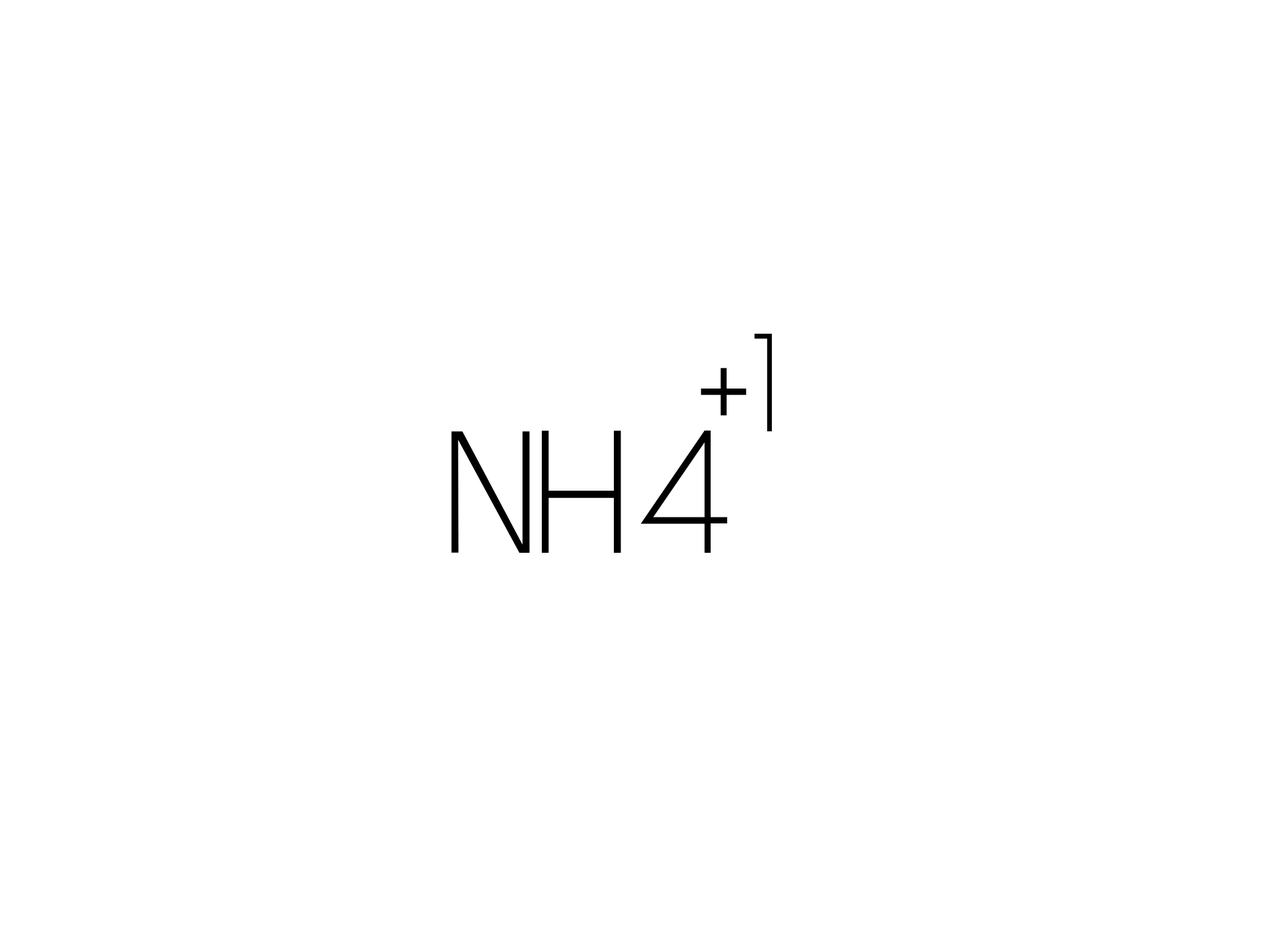
<style>
.page{position:relative;width:1261px;height:946px;background:#ffffff}
.page>*{position:absolute;margin:0}
.t1{font:138.9px "Alcubierre";color:#000000;scale:0.95 1}
.t2{font:162.1px "Alcubierre";color:#000000;scale:0.95 1}
.t3{font:173.6px "Alcubierre";color:#000000;scale:0.95 1}
</style>
<div class="page">
<p class="t1" style="left:754px;top:333px;width:18px;height:99px">1</p>
<p class="t2" style="left:701px;top:368px;width:46px;height:48px">+</p>
<p class="t3" style="left:451px;top:430px;width:276px;height:122px">NH4</p>
</div>
